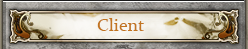
<style>
.page{position:relative;width:248px;height:49px}
.page>*{position:absolute;margin:0}
.t1{font:18px "Constantia";color:#c27521}
</style>
<div class="page">
<p class="t1" style="left:97px;top:18px;width:47px;height:13px">Client</p>
</div>
